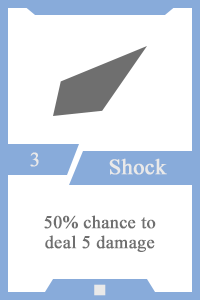
<style>
.page{position:relative;width:200px;height:300px;background:#ffffff}
.page>*{position:absolute;margin:0}
.t1{font:20px "TimesNewRomanPSMT";color:#e9e9e9;font-weight:bold}
.t2{font:22px "TimesNewRomanPSMT";color:#e9e9e9;font-weight:bold}
.t3{font:18px/20px "TimesNewRomanPSMT";color:#6f6f6f;font-weight:bold}
.t4{font:14px "AdobeHeitiStd-Regular";color:#e9e9e9;font-weight:bold}
</style>
<div class="page">
<p class="t1" style="left:30px;top:152px;width:9px;height:15px">3</p>
<p class="t2" style="left:109px;top:158px;width:58px;height:17px">Shock</p>
<p class="t3" style="left:44px;top:215px;width:112px;height:37px;text-align:center">50% chance to<br>deal 5 damage</p>
<p class="t4" style="left:94px;top:284px;width:12px;height:12px">■</p>
</div>
